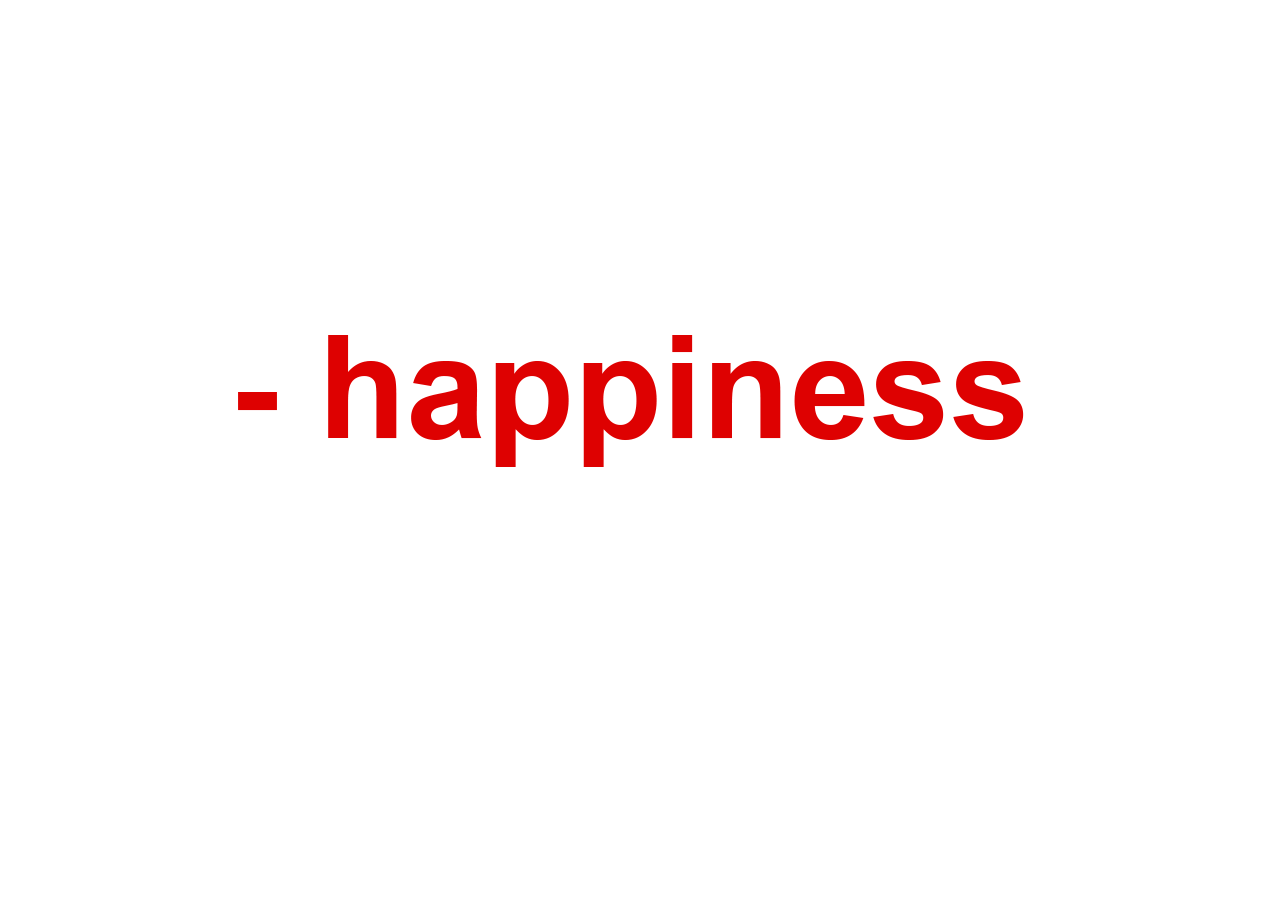
<style>
.page{position:relative;width:1280px;height:900px;background:#ffffff}
.page>*{position:absolute;margin:0}
.t1{font:144px "Arial-BoldMT";color:#de0101}
</style>
<div class="page">
<p class="t1" style="left:238px;top:335px;width:786px;height:132px">- happiness</p>
</div>
